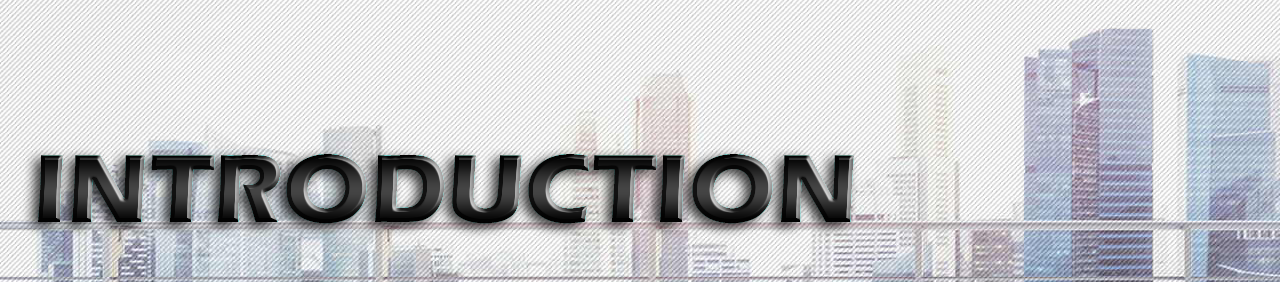
<style>
.page{position:relative;width:1280px;height:282px}
.page>*{position:absolute;margin:0}
.t1{font:100px "ErasITC-Bold"}
</style>
<div class="page">
<p class="t1" style="left:38px;top:154px;width:816px;height:70px">INTRODUCTION</p>
</div>
